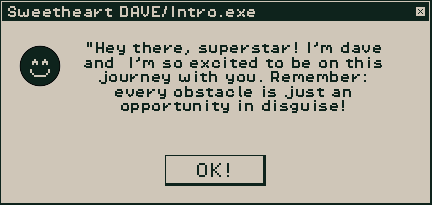
<style>
.page{position:relative;width:432px;height:205px;background:#cfc6b8}
.page>*{position:absolute;margin:0}
.t1{font:12.1px "PixelOperator8";color:#cfc6b8}
.t2{font:12.1px "PixelOperator8";color:#0e231c}
.t3{font:16.2px "PixelOperator8";color:#0e231c}
</style>
<div class="page">
<p class="t1" style="left:8px;top:6px;width:247px;height:11px">Sweetheart DAVE/Intro.exe</p>
<p class="t2" style="left:84px;top:42px;width:298px;height:71px;text-align:center">"Hey there, superstar! I’m dave and  I’m so excited to be on this journey with you. Remember: every obstacle is just an opportunity in disguise!</p>
<p class="t3" style="left:197px;top:163px;width:32px;height:14px">OK!</p>
</div>
